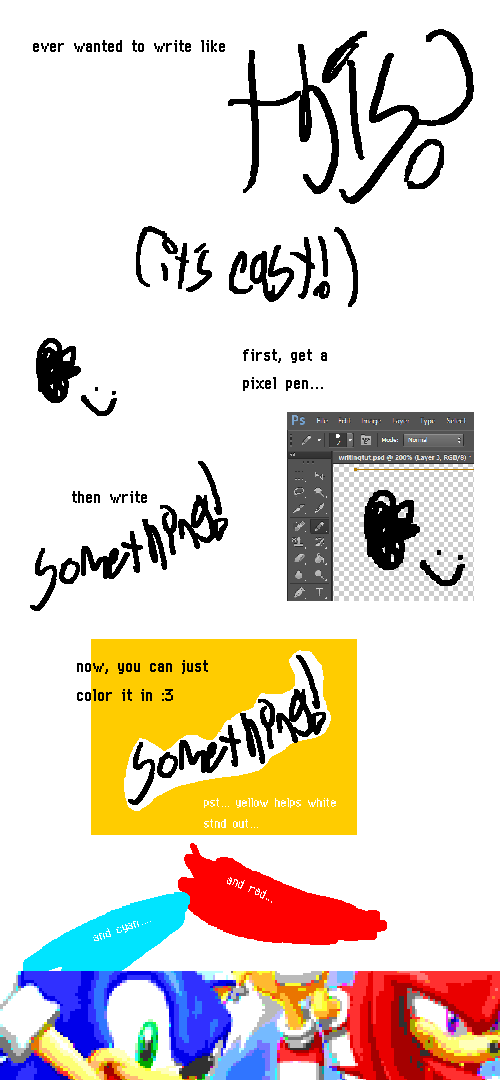
<style>
.page{position:relative;width:500px;height:1080px;background:#ffffff}
.page>*{position:absolute;margin:0}
.t1{font:24px "PMD";color:#000000}
.t2{font:18px "PMD";color:#ffffff}
</style>
<div class="page">
<p class="t1" style="left:33px;top:40px;width:192px;height:12px">ever wanted to write like</p>
<p class="t1" style="left:243px;top:349px;width:84px;height:42px">first, get a pixel pen...</p>
<p class="t1" style="left:72px;top:491px;width:75px;height:12px">then write</p>
<p class="t1" style="left:77px;top:660px;width:131px;height:41px">now, you can just color it in :3</p>
<p class="t2" style="left:204px;top:798px;width:132px;height:30px">pst... yellow helps white stnd out...</p>
<p class="t2" style="left:227px;top:877px;width:45px;height:26px;rotate:23deg">and red...</p>
<p class="t2" style="left:93px;top:921px;width:58px;height:20px;rotate:-19deg">and cyan....</p>
</div>
